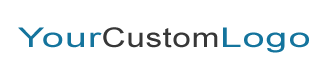
<style>
.page{position:relative;width:328px;height:84px;background:#ffffff}
.page>*{position:absolute;margin:0}
.t1{font:27px "ArialMT";letter-spacing:0.03em;color:#373737;scale:1.23 1}
.t2{font:27px "ArialMT";letter-spacing:0.05em;color:#14749d;scale:1.47 1}
</style>
<div class="page">
<p class="t1" style="left:18px;top:27px;width:291px;height:26px"><span class="t2">Your</span>Custom<span class="t2">Logo</span></p>
</div>
